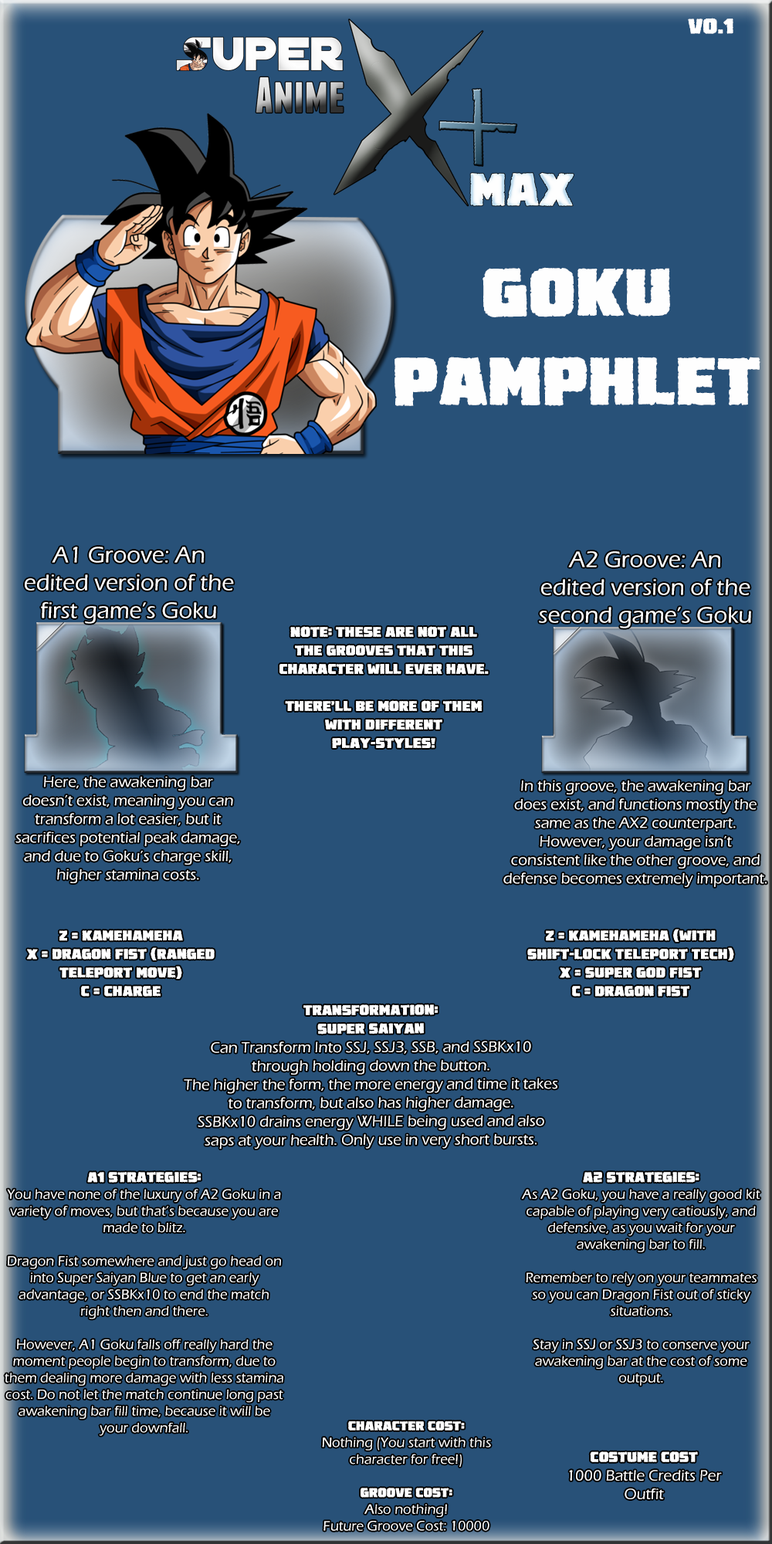
<style>
.page{position:relative;width:772px;height:1544px;background:#285178}
.page>*{position:absolute;margin:0}
.t1{font:23.2px "DestroyEarthBB";color:#fefefe}
.t2{font:74.1px "DestroyEarthBB";color:#fefefe}
.t3{font:23.2px "ErasITC-Medium";color:#fefefe}
.t4{font:15.4px "DestroyEarthBB";color:#fefefe}
.t5{font:15.4px "ErasITC-Medium";color:#fefefe}
.t6{font:13.9px "ErasITC-Medium";color:#fefefe}
.t7{font:13.9px "DestroyEarthBB";color:#fefefe}
</style>
<div class="page">
<p class="t1" style="left:688px;top:18px;width:46px;height:16px">V0.1</p>
<p class="t2" style="left:395px;top:267px;width:366px;height:139px;text-align:center">Goku Pamphlet</p>
<p class="t3" style="left:25px;top:547px;width:209px;height:77px;text-align:center">A1 Groove: An edited version of the first game’s Goku</p>
<p class="t3" style="left:539px;top:551px;width:212px;height:78px;text-align:center">A2 Groove: An edited version of the second game’s Goku</p>
<p class="t4" style="left:280px;top:626px;width:209px;height:122px;text-align:center">Note: These are not all the grooves that this character will ever have.<br><br>There’ll be more of them with different play-styles!</p>
<p class="t5" style="left:15px;top:777px;width:225px;height:106px;text-align:center">Here, the awakening bar<br>doesn’t exist, meaning you can transform a lot easier, but it sacrifices potential peak damage, and due to Goku’s charge skill, higher stamina costs.</p>
<p class="t5" style="left:503px;top:781px;width:264px;height:106px;text-align:center">In this groove, the awakening bar does exist, and functions mostly the same as the AX2 counterpart. However, your damage isn’t consistent like the other groove, and defense becomes extremely important.</p>
<p class="t4" style="left:527px;top:929px;width:207px;height:68px;text-align:center">Z = Kamehameha (With SHift-Lock Teleport Tech)<br>X = Super God Fist<br>C = Dragon Fist</p>
<p class="t4" style="left:26px;top:930px;width:189px;height:67px;text-align:center">Z = Kamehameha<br>X = Dragon Fist (Ranged Teleport Move)<br>C = Charge</p>
<p class="t5" style="left:184px;top:1005px;width:373px;height:144px;text-align:center"><span class="t4">Transformation:<br>Super Saiyan<br></span>Can Transform Into SSJ, SSJ3, SSB, and SSBKx10 through holding down the button.<br>The higher the form, the more energy and time it takes to transform, but also has higher damage.<br>SSBKx10 drains energy WHILE being used and also saps at your health. Only use in very short bursts.</p>
<p class="t6" style="left:5px;top:1172px;width:278px;height:264px;text-align:center"><span class="t4">A1 Strategies:<br></span>You have none of the luxury of A2 Goku in a variety of moves, but that’s because you are made to blitz.<br><br>Dragon Fist somewhere and just go head on into Super Saiyan Blue to get an early advantage, or SSBKx10 to end the match right then and there.<br><br>However, A1 Goku falls off really hard the moment people begin to transform, due to them dealing more damage with less stamina<br>cost. Do not let the match continue long past<br>awakening bar fill time, because it will be your downfall.</p>
<p class="t6" style="left:521px;top:1172px;width:240px;height:214px;text-align:center"><span class="t4">A2 Strategies:<br></span>As A2 Goku, you have a really good kit capable of playing very catiously, and defensive, as you wait for your awakening bar to fill.<br><br>Remember to rely on your teammates<br>so you can Dragon Fist out of sticky<br>situations.<br><br>Stay in SSJ or SSJ3 to conserve your awakening bar at the cost of some output.</p>
<p class="t6" style="left:322px;top:1421px;width:169px;height:110px;text-align:center"><span class="t7">Character Cost:<br></span>Nothing (You start with this character for free!)<br><br><span class="t7">Groove Cost:</span><br>Also nothing!<br>Future Groove Cost: 10000  Battle Credits</p>
<p class="t5" style="left:569px;top:1452px;width:153px;height:48px;text-align:center"><span class="t4">Costume Cost<br></span>1000 Battle Credits Per Outfit</p>
</div>
